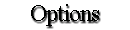
<style>
.page{position:relative;width:130px;height:30px;background:#ffffff}
.page>*{position:absolute;margin:0}
.t1{font:24px "TimesNewRomanPSMT";letter-spacing:-0.04em;color:#000100}
</style>
<div class="page">
<p class="t1" style="left:31px;top:4px;width:68px;height:22px">Options</p>
</div>
